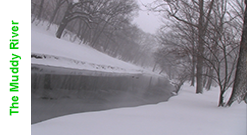
<style>
.page{position:relative;width:247px;height:135px}
.page>*{position:absolute;margin:0}
.t1{font:12px "Arial-BoldMT";color:#00cc00}
</style>
<div class="page">
<p class="t1" style="left:9px;top:20px;width:13px;height:96px;rotate:-90deg">The Muddy River</p>
</div>
